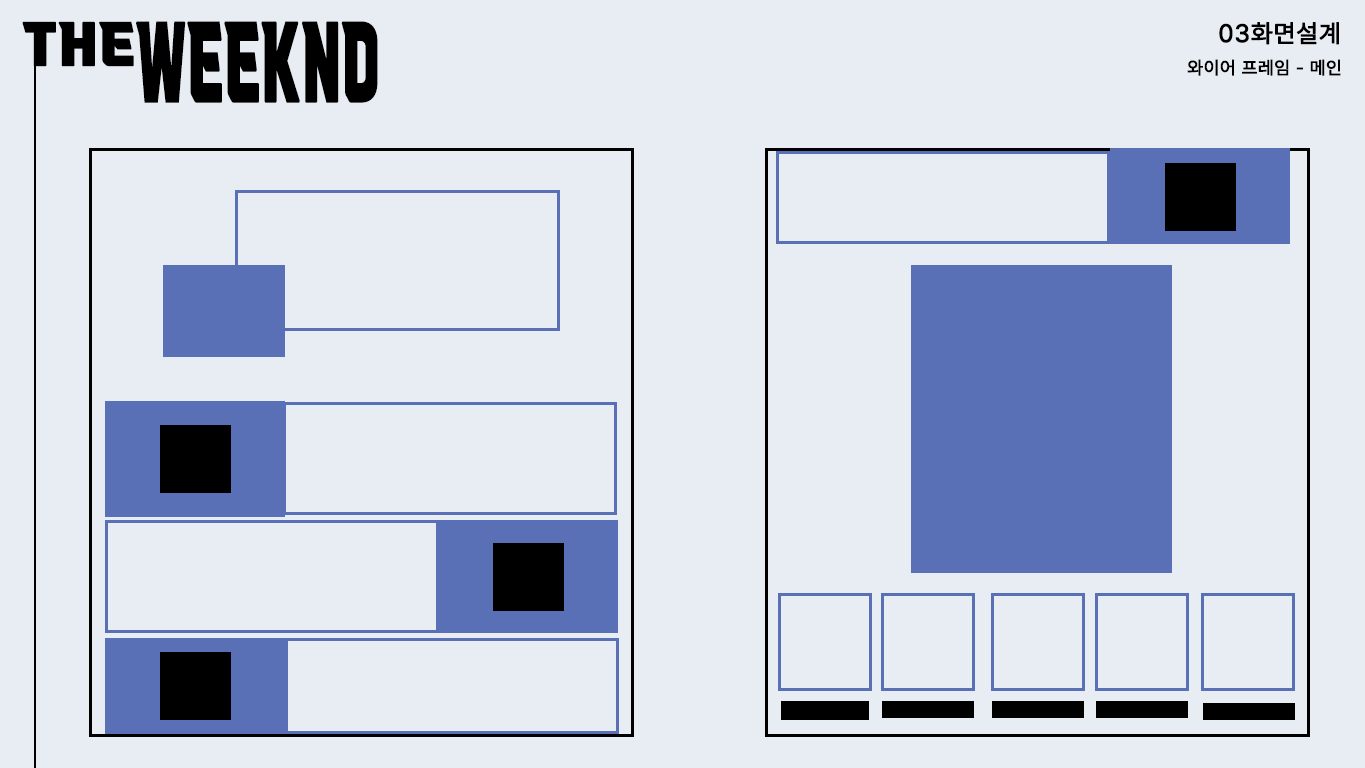
<style>
.page{position:relative;width:1365px;height:768px;background:#e8edf3}
.page>*{position:absolute;margin:0}
.t1{font:50px "VITRO-CORE-TTF";letter-spacing:0.03em;color:#000000;font-weight:bold}
.t2{font:91.5px "VITRO-CORE-TTF";letter-spacing:0.03em;color:#000000;font-weight:bold;scale:0.55 1}
.t3{font:25px "Pretendard-Regular";letter-spacing:0.03em;color:#000000;font-weight:bold}
.t4{font:18px "Pretendard-Regular";letter-spacing:0.03em;color:#000000;font-weight:bold}
</style>
<div class="page">
<p class="t1" style="left:22px;top:21px;width:112px;height:46px">THE</p>
<p class="t2" style="left:136px;top:21px;width:242px;height:82px">WEEKND</p>
<p class="t3" style="left:1219px;top:22px;width:120px;height:23px">03화면설계</p>
<p class="t4" style="left:1187px;top:59px;width:154px;height:17px">와이어 프레임 - 메인</p>
</div>
